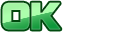
<style>
.page{position:relative;width:114px;height:32px;background:#ffffff}
.page>*{position:absolute;margin:0}
.t1{font:41.3px "DFSoGeiStd-W9";letter-spacing:-0.03em;font-weight:bold;scale:0.96 1}
</style>
<div class="page">
<p class="t1" style="left:2px;top:2px;width:59px;height:28px">OK</p>
</div>
